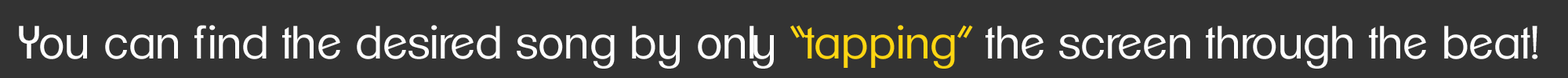
<style>
.page{position:relative;width:1568px;height:78px;background:#333333}
.page>*{position:absolute;margin:0}
.t1{font:45.5px "ClementePDag-Book";color:#ffffff}
.t2{font:45.5px "ClementePDag-Book";color:#ffd612}
</style>
<div class="page">
<p class="t1" style="left:19px;top:25px;width:1519px;height:44px">You can find the desired song by only <span class="t2">“tapping”</span> the screen through the beat!</p>
</div>
